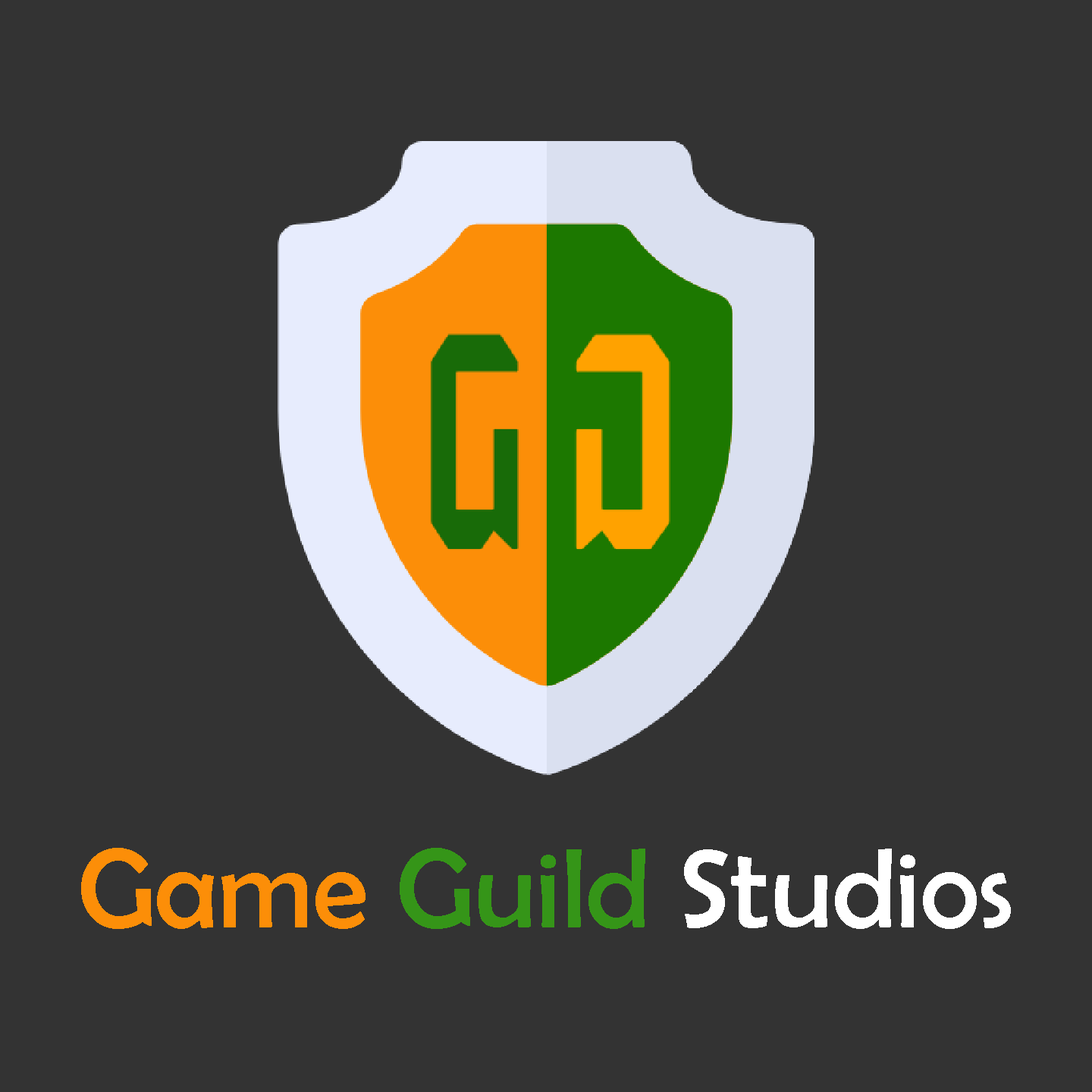
<style>
.page{position:relative;width:1092px;height:1092px;background:#333333}
.page>*{position:absolute;margin:0}
.t1{font:113.7px "BerlinSansFB-Reg";color:#ffffff}
.t2{font:113.7px "BerlinSansFB-Reg";color:#fc8e08}
.t3{font:113.7px "BerlinSansFB-Reg";color:#359518}
</style>
<div class="page">
<p class="t1" style="left:81px;top:848px;width:930px;height:81px"><span class="t2">Game </span><span class="t3">Guild</span> Studios</p>
</div>
